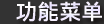
<style>
.page{position:relative;width:104px;height:24px;background:#333333}
.page>*{position:absolute;margin:0}
.t1{font:22px "MicrosoftJhengHeiBold";color:#fdfefe;text-transform:uppercase}
</style>
<div class="page">
<p class="t1" style="left:16px;top:1px;width:86px;height:21px">功能菜单</p>
</div>
